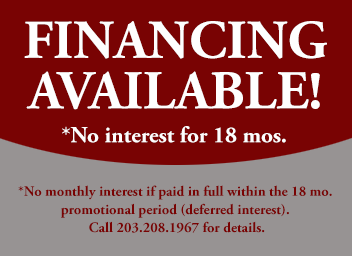
<style>
.page{position:relative;width:352px;height:256px;background:#790303}
.page>*{position:absolute;margin:0}
.t1{font:54.5px/50.5px "AGaramondPro-Bold";color:#fefefe}
.t2{font:23px "AGaramondPro-Bold";color:#fefefe}
.t3{font:14.4px/18.1px "AGaramondPro-Bold";color:#790303}
</style>
<div class="page">
<p class="t1" style="left:24px;top:21px;width:303px;height:89px;text-align:center">FINANCING<br>AVAILABLE!</p>
<p class="t2" style="left:62px;top:126px;width:224px;height:17px">*No interest for 18 mos.</p>
<p class="t3" style="left:18px;top:185px;width:314px;height:48px;text-align:center">*No monthly interest if paid in full within the 18 mo.<br>promotional period (deferred interest).<br> Call 203.208.1967 for details.</p>
</div>
